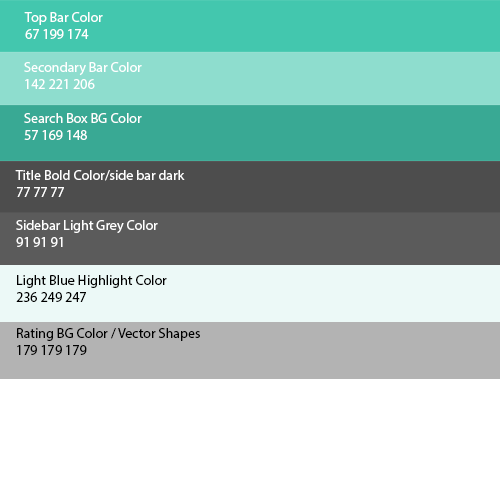
<style>
.page{position:relative;width:500px;height:500px;background:#ffffff}
.page>*{position:absolute;margin:0}
.t1{font:14px "MyriadPro-Regular";color:#ffffff}
.t2{font:14px "MyriadPro-Regular";color:#000000}
</style>
<div class="page">
<p class="t1" style="left:24px;top:12px;width:79px;height:27px">Top Bar Color<br>67 199 174</p>
<p class="t1" style="left:24px;top:62px;width:118px;height:27px">Secondary Bar Color<br>142 221 206</p>
<p class="t1" style="left:24px;top:113px;width:118px;height:27px">Search Box BG Color<br>57 169 148</p>
<p class="t1" style="left:15px;top:170px;width:170px;height:27px">Title Bold Color/side bar dark<br>77 77 77</p>
<p class="t1" style="left:16px;top:220px;width:142px;height:27px">Sidebar Light Grey Color<br>91 91 91</p>
<p class="t2" style="left:16px;top:275px;width:151px;height:27px">Light Blue Highlight Color<br>236 249 247</p>
<p class="t2" style="left:17px;top:328px;width:183px;height:27px">Rating BG Color / Vector Shapes<br>179 179 179</p>
</div>
